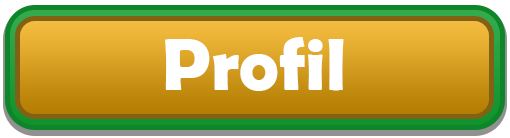
<style>
.page{position:relative;width:510px;height:138px}
.page>*{position:absolute;margin:0}
.t1{font:75px "BerlinSansFBDemi-Bold";color:#ffffff}
</style>
<div class="page">
<p class="t1" style="left:165px;top:37px;width:179px;height:54px">Profil</p>
</div>
